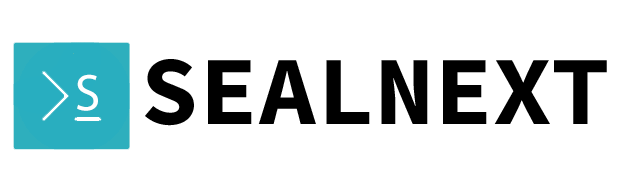
<style>
.page{position:relative;width:622px;height:196px;background:#ffffff}
.page>*{position:absolute;margin:0}
.t1{font:98px "SourceCodePro-Bold";color:#000000}
.t2{font:52px "MyriadPro-Regular";color:#ffffff}
</style>
<div class="page">
<p class="t1" style="left:145px;top:59px;width:462px;height:67px">SEALNEXT</p>
<p class="t2" style="left:77px;top:74px;width:21px;height:37px">S</p>
</div>
